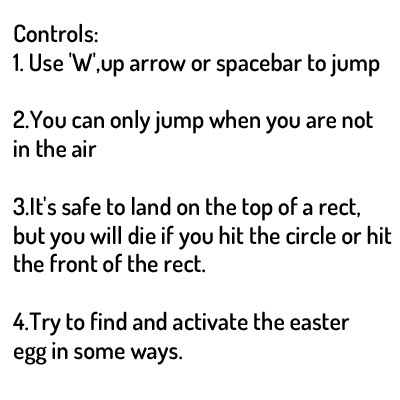
<style>
.page{position:relative;width:400px;height:400px;background:#ffffff}
.page>*{position:absolute;margin:0}
.t1{font:24px "Dosis-SemiBold";color:#000000}
</style>
<div class="page">
<p class="t1" style="left:13px;top:23px;width:379px;height:342px">Controls:<br>1. Use 'W',up arrow or spacebar to jump<br><br>2.You can only jump when you are not <br>in the air<br><br>3.It's safe to land on the top of a rect,<br>but you will die if you hit the circle or hit <br>the front of the rect.<br><br>4.Try to find and activate the easter<br>egg in some ways.</p>
</div>
